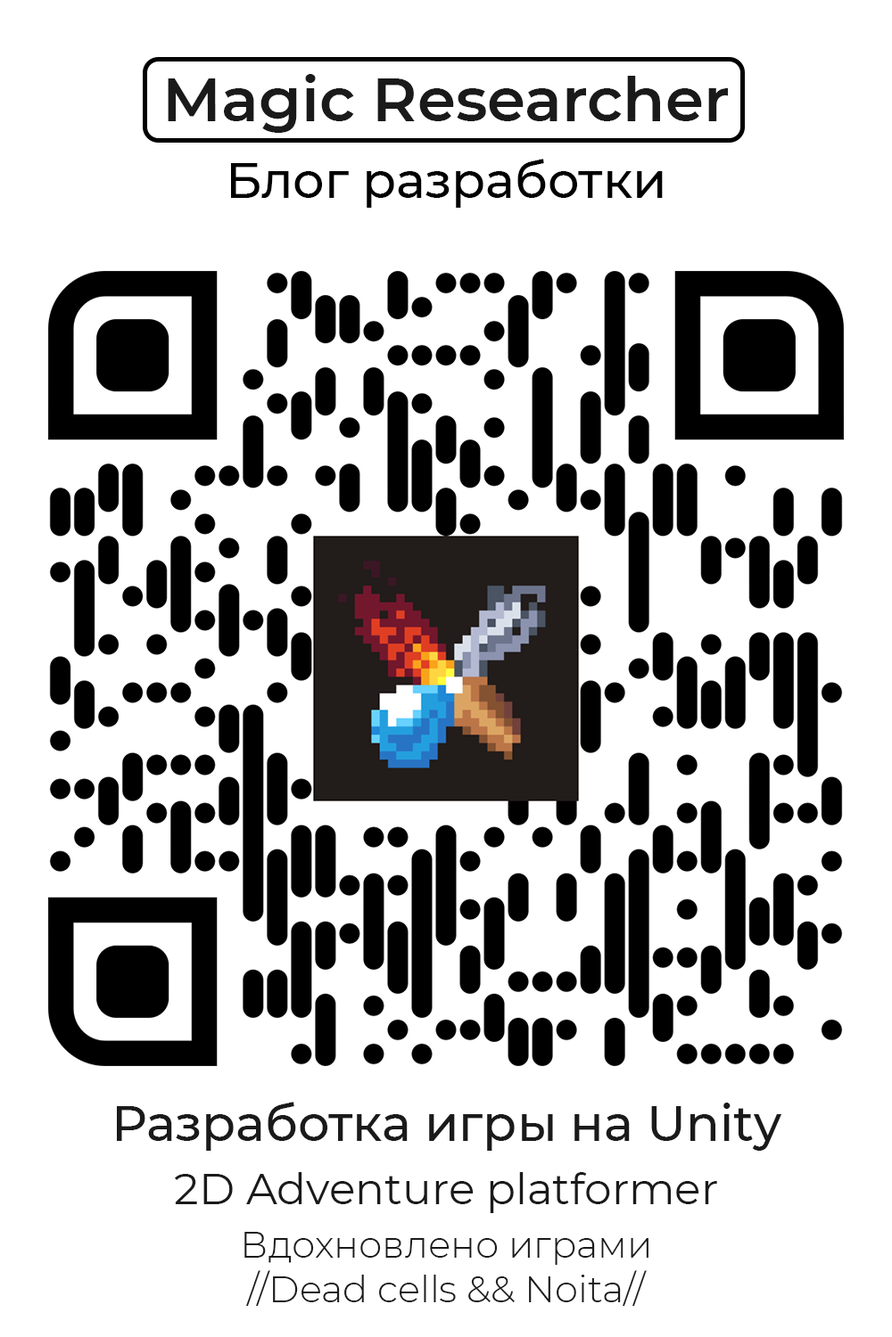
<style>
.page{position:relative;width:892px;height:1337px;background:#ffffff}
.page>*{position:absolute;margin:0}
.t1{font:61.5px "Montserrat-SemiBold";color:#1a1a1a}
.t2{font:49.5px "Montserrat-Medium";color:#000000}
.t3{font:49.5px "Montserrat-Medium";color:#1a1a1a}
.t4{font:43.3px "Montserrat-Regular";color:#1a1a1a}
.t5{font:37.2px "Montserrat-Light";color:#1a1a1a}
</style>
<div class="page">
<p class="t1" style="left:168px;top:74px;width:560px;height:59px">Magic Researcher</p>
<p class="t2" style="left:231px;top:159px;width:431px;height:49px">Блог разработки</p>
<p class="t3" style="left:117px;top:1102px;width:665px;height:49px">Разработка игры на Unity</p>
<p class="t4" style="left:174px;top:1172px;width:543px;height:41px">2D Adventure platformer</p>
<p class="t5" style="left:244px;top:1232px;width:404px;height:74px;text-align:center">Вдохновлено играми<br>//Dead cells &amp;&amp; Noita//</p>
</div>
